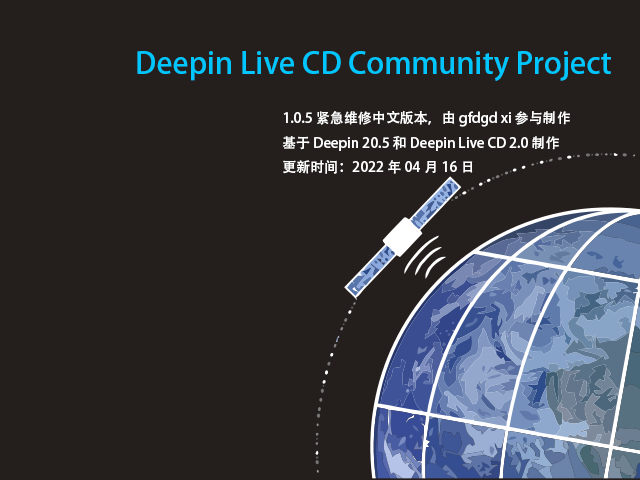
<style>
.page{position:relative;width:640px;height:480px;background:#241f1c}
.page>*{position:absolute;margin:0}
.t1{font:30px "AdobeHeitiStd-Regular";color:#00c6ff}
.t2{font:14px "AdobeHeitiStd-Regular";color:#ffffff}
</style>
<div class="page">
<p class="t1" style="left:137px;top:51px;width:474px;height:30px">Deepin Live CD Community Project</p>
<p class="t2" style="left:282px;top:111px;width:288px;height:63px">1.0.5 紧急维修中文版本，由 gfdgd xi 参与制作<br>基于 Deepin 20.5 和 Deepin Live CD 2.0 制作<br>更新时间：2022年04月16日</p>
</div>
